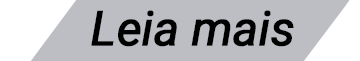
<style>
.page{position:relative;width:360px;height:61px;background:#bdbec4}
.page>*{position:absolute;margin:0}
.t1{font:48px "Roboto-Italic";letter-spacing:-0.02em;color:#000000;font-weight:bold}
</style>
<div class="page">
<p class="t1" style="left:91px;top:10px;width:203px;height:37px">Leia mais</p>
</div>
